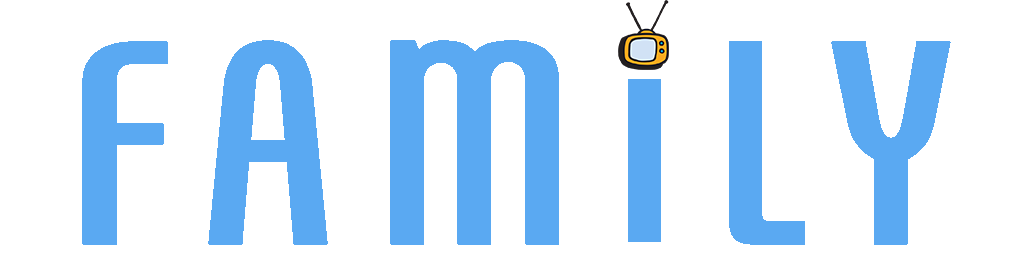
<style>
.page{position:relative;width:1024px;height:265px;background:#ffffff}
.page>*{position:absolute;margin:0}
.t1{font:286.6px "Brougham-Condensed";letter-spacing:0.1em;color:#59a9f2;font-weight:bold;scale:1.04 1}
.t2{font:269.4px "Brougham-Condensed";letter-spacing:0.1em;color:#59a9f2;font-weight:bold;scale:1.11 1}
</style>
<div class="page">
<p class="t1" style="left:82px;top:37px;width:869px;height:208px">FAM<span class="t2">i</span>LY</p>
</div>
